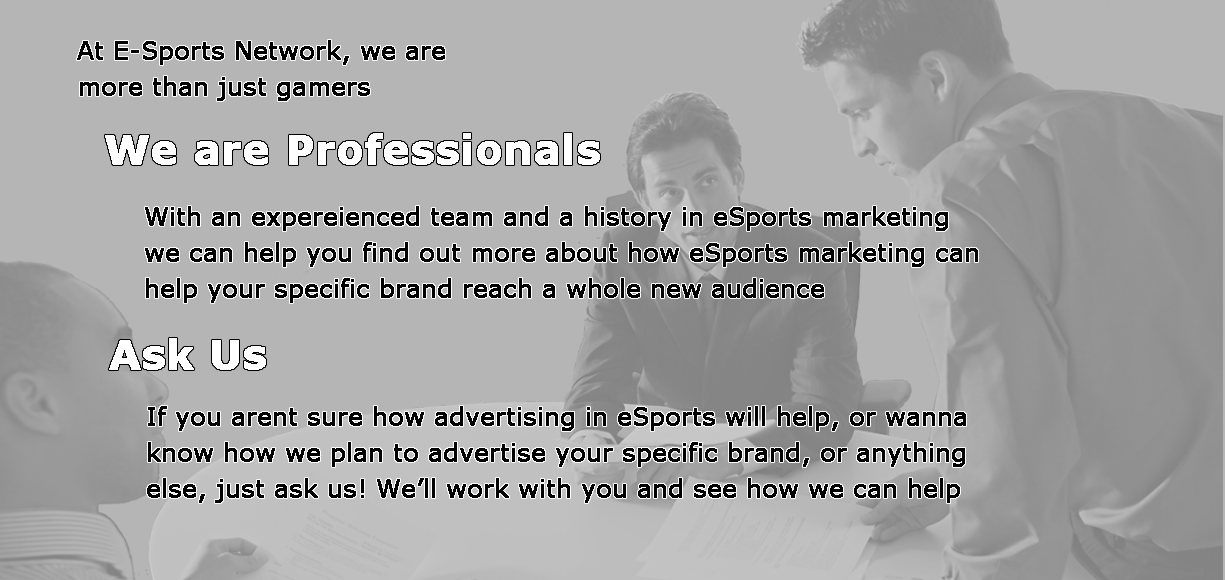
<style>
.page{position:relative;width:1225px;height:580px;background:#b5b5b5}
.page>*{position:absolute;margin:0}
.t1{font:24px/36px "Verdana";color:#000000;font-weight:bold}
.t2{font:40px "Verdana-Bold";color:#ffffff;font-weight:bold}
</style>
<div class="page">
<p class="t1" style="left:77px;top:40px;width:368px;height:61px">At E-Sports Network, we are more than just gamers</p>
<p class="t2" style="left:105px;top:133px;width:495px;height:32px">We are Professionals</p>
<p class="t1" style="left:145px;top:206px;width:833px;height:97px">With an expereienced team and a history in eSports marketing we can help you find out more about how eSports marketing can help your specific brand reach a whole new audience</p>
<p class="t2" style="left:109px;top:338px;width:157px;height:32px">Ask Us</p>
<p class="t1" style="left:147px;top:406px;width:819px;height:97px">If you arent sure how advertising in eSports will help, or wanna know how we plan to advertise your specific brand, or anything else, just ask us! We’ll work with you and see how we can help</p>
</div>
